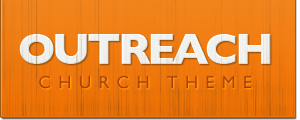
<style>
.page{position:relative;width:300px;height:120px}
.page>*{position:absolute;margin:0}
.t1{font:44px "GillSans-Bold";letter-spacing:-0.075em;color:#f1f3f0;text-transform:uppercase}
.t2{font:18px "GillSans";letter-spacing:0.4em;color:#af420d}
</style>
<div class="page">
<p class="t1" style="left:19px;top:34px;width:252px;height:30px">outreach</p>
<p class="t2" style="left:39px;top:75px;width:213px;height:14px">CHURCH THEME</p>
</div>
